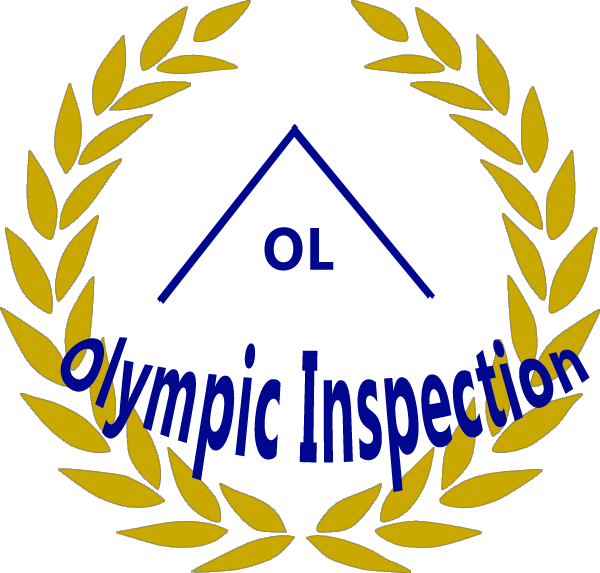
<style>
.page{position:relative;width:600px;height:573px;background:#ffffff}
.page>*{position:absolute;margin:0}
.t1{font:59.7px "MicrosoftTaiLe-Bold";letter-spacing:0.025em;color:#00078f;scale:0.92 1}
.t2{font:48px "MicrosoftTaiLe-Bold";letter-spacing:0.025em;color:#00078f;scale:1.15 1}
</style>
<div class="page">
<p class="t1" style="left:264px;top:227px;width:70px;height:44px">OL</p>
<p class="t2" style="left:60px;top:337px;width:530px;height:156px;text-align:center">Olympic Inspection</p>
</div>
